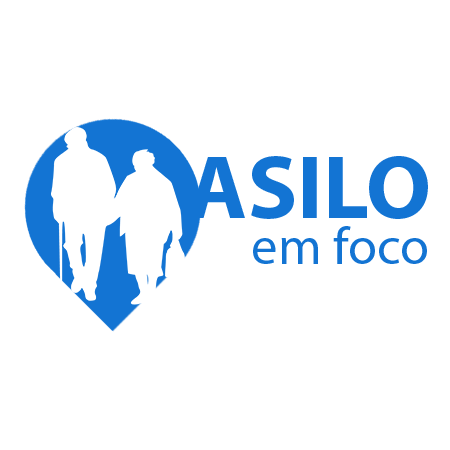
<style>
.page{position:relative;width:450px;height:450px;background:#ffffff}
.page>*{position:absolute;margin:0}
.t1{font:90.9px "MyriadPro-Bold";color:#1374d3}
.t2{font:52.7px "MyriadPro-Regular";color:#1374d3}
</style>
<div class="page">
<p class="t1" style="left:189px;top:156px;width:239px;height:63px">ASILO</p>
<p class="t2" style="left:253px;top:226px;width:174px;height:38px">em foco</p>
</div>
